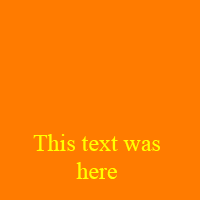
<style>
.page{position:relative;width:200px;height:200px;background:#ff7b00}
.page>*{position:absolute;margin:0}
.t1{font:24px "TimesNewRomanPSMT";color:#ffff00}
</style>
<div class="page">
<p class="t1" style="left:33px;top:134px;width:127px;height:45px;text-align:center">This text was here</p>
</div>
